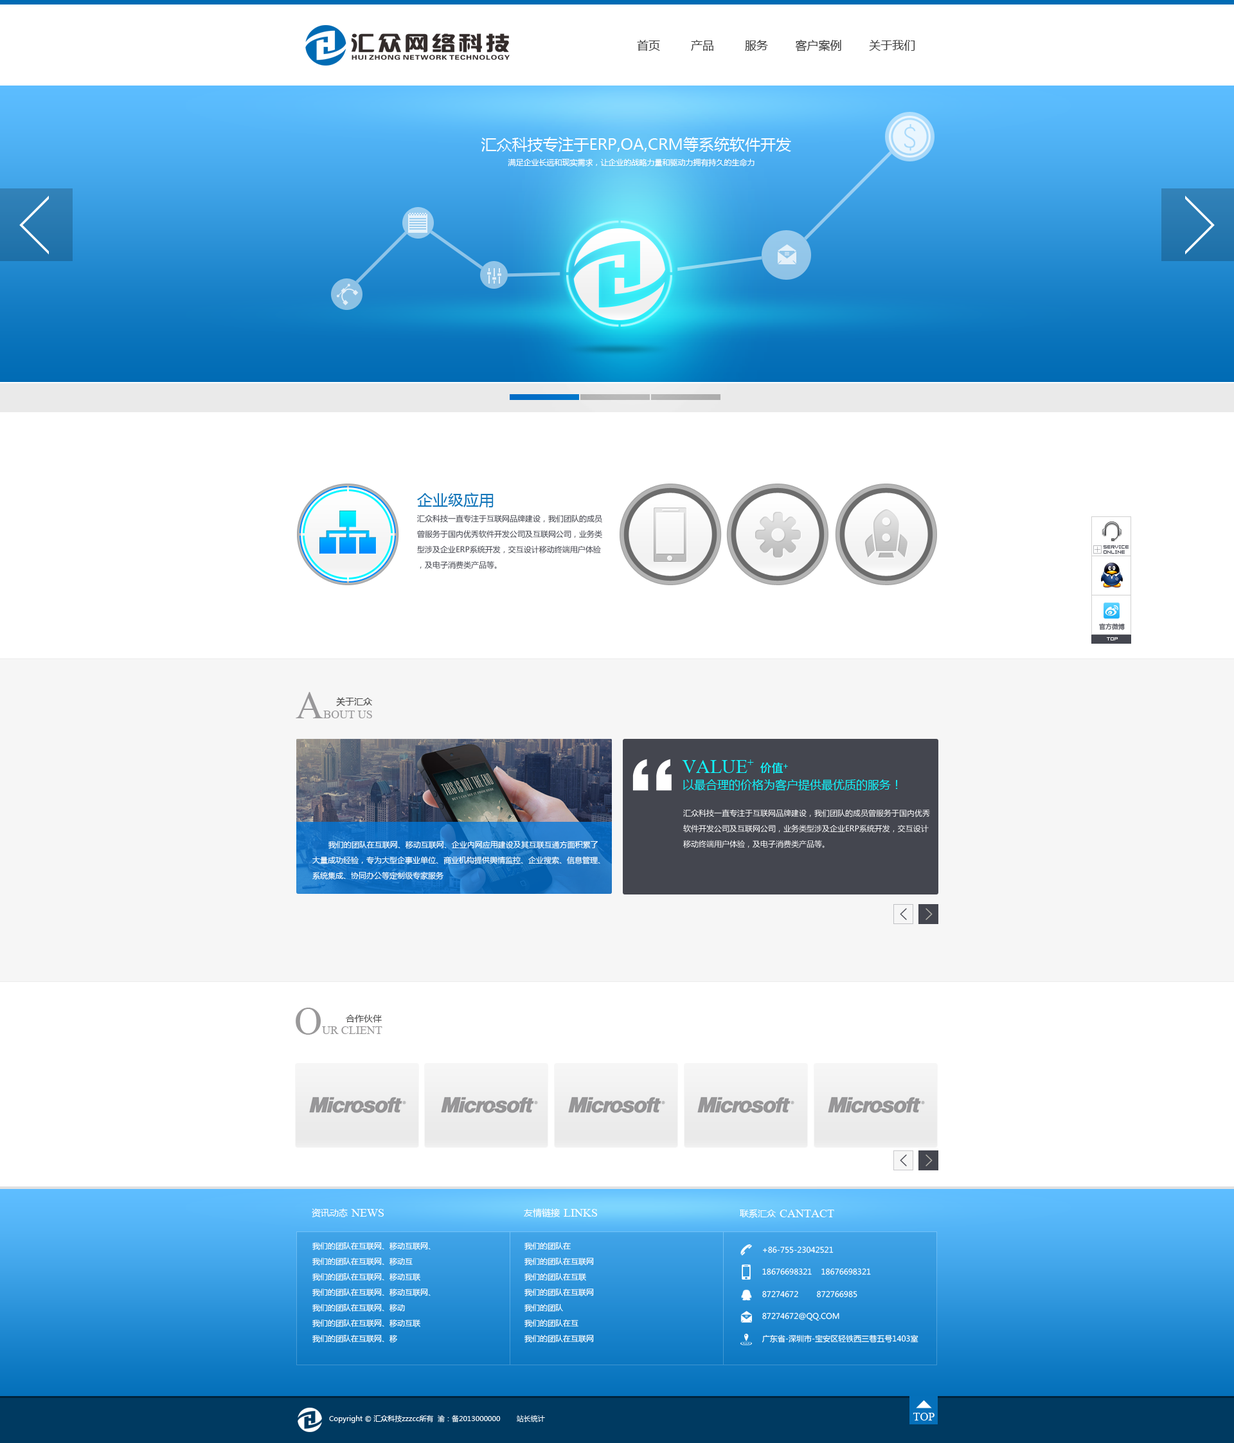
<style>
.page{position:relative;width:1234px;height:1443px;background:#ffffff}
.page>*{position:absolute;margin:0}
.t1{font:11.6px "MicrosoftYaHei";color:#3d3d3d}
.t2{font:15.4px "MicrosoftYaHei";color:#ffffff}
.t3{font:7.7px "MicrosoftYaHei";color:#ffffff}
.t4{font:15.4px "MicrosoftYaHei";color:#1275b9}
.t5{font:7.7px/15.4px "MicrosoftYaHei";color:#44464f}
.t6{font:5.1px/5.1px "04b08";color:#44464f}
.t7{font:6.4px "MicrosoftYaHei";color:#44464f}
.t8{font:11.6px "MongolianBaiti";color:#989799}
.t9{font:38.6px "MongolianBaiti";color:#989799}
.t10{font:9px "MicrosoftYaHei";color:#494949}
.t11{font:102px "FZH4FW--GB1-0";color:#ffffff}
.t12{font:19.3px "MongolianBaiti";color:#11f7ff}
.t13{font:11.6px "AdobeHeitiStd-Regular";color:#11f7ff}
.t14{font:11.6px "MicrosoftYaHei";color:#11f7ff}
.t15{font:7.7px/15.4px "MicrosoftYaHei";color:#ffffff}
.t16{font:11.6px "MongolianBaiti";color:#999899}
.t17{font:38.6px "MongolianBaiti";color:#999899}
.t18{font:9px "MicrosoftYaHei";color:#ffffff}
.t19{font:11.6px "MongolianBaiti";color:#ffffff}
.t20{font:7.8px/22.2px "MicrosoftYaHei";color:#ffffff;text-transform:uppercase}
.t21{font:7.1px "MicrosoftYaHei";color:#ffffff}
</style>
<div class="page">
<p class="t1" style="left:637px;top:39px;width:278px;height:12px">首页         产品         服务        客户案例        关于我们</p>
<p class="t2" style="left:481px;top:137px;width:310px;height:15px">汇众科技专注于ERP,OA,CRM等系统软件开发</p>
<p class="t3" style="left:508px;top:158px;width:247px;height:8px">满足企业长远和现实需求，让企业的战略力量和驱动力拥有持久的生命力</p>
<p class="t4" style="left:417px;top:492px;width:77px;height:15px">企业级应用</p>
<p class="t5" style="left:417px;top:514px;width:185px;height:55px">汇众科技一直专注于互联网品牌建设，我们团队的成员曾服务于国内优秀软件开发公司及互联网公司，业务类型涉及企业ERP系统开发，交互设计移动终端用户体验，及电子消费类产品等。</p>
<p class="t6" style="left:1104px;top:545px;width:25px;height:9px">SERVICE <br>ONLINE</p>
<p class="t7" style="left:1099px;top:623px;width:26px;height:7px">官方微博</p>
<p class="t8" style="left:296px;top:692px;width:76px;height:26px"><span class="t9">A</span>BOUT US</p>
<p class="t10" style="left:336px;top:697px;width:36px;height:9px">关于汇众</p>
<p class="t11" style="left:633px;top:759px;width:39px;height:32px">“</p>
<p class="t12" style="left:682px;top:759px;width:72px;height:14px">VALUE+</p>
<p class="t13" style="left:760px;top:762px;width:28px;height:11px">价值+</p>
<p class="t14" style="left:683px;top:779px;width:215px;height:12px">以最合理的价格为客户提供最优质的服务！</p>
<p class="t15" style="left:683px;top:809px;width:247px;height:39px">汇众科技一直专注于互联网品牌建设，我们团队的成员曾服务于国内优秀软件开发公司及互联网公司，业务类型涉及企业ERP系统开发，交互设计移动终端用户体验，及电子消费类产品等。</p>
<p class="t15" style="left:312px;top:840px;width:288px;height:39px">我们的团队在互联网、移动互联网、企业内网应用建设及其互联互通方面积累了大量成功经验，专为大型企事业单位、商业机构提供舆情监控、企业搜索、信息管理、系统集成、协同办公等定制级专家服务</p>
<p class="t16" style="left:296px;top:1007px;width:86px;height:27px"><span class="t17">O</span>UR CLIENT</p>
<p class="t10" style="left:346px;top:1014px;width:36px;height:8px">合作伙伴</p>
<p class="t18" style="left:312px;top:1208px;width:36px;height:9px">资讯动态</p>
<p class="t19" style="left:351px;top:1209px;width:33px;height:7px">NEWS</p>
<p class="t18" style="left:524px;top:1208px;width:36px;height:9px">友情链接</p>
<p class="t19" style="left:564px;top:1209px;width:34px;height:7px">LINKS</p>
<p class="t18" style="left:740px;top:1209px;width:36px;height:9px">联系汇众</p>
<p class="t19" style="left:780px;top:1209px;width:54px;height:8px">CANTACT</p>
<p class="t15" style="left:312px;top:1241px;width:119px;height:101px">我们的团队在互联网、移动互联网、<br>我们的团队在互联网、移动互<br>我们的团队在互联网、移动互联<br>我们的团队在互联网、移动互联网、<br>我们的团队在互联网、移动<br>我们的团队在互联网、移动互联<br>我们的团队在互联网、移</p>
<p class="t15" style="left:525px;top:1241px;width:69px;height:101px">我们的团队在<br>我们的团队在互联网<br>我们的团队在互联<br>我们的团队在互联网<br>我们的团队<br>我们的团队在互<br>我们的团队在互联网</p>
<p class="t20" style="left:762px;top:1246px;width:157px;height:96px">+86-755-23042521<br>18676698321    18676698321<br>87274672        872766985<br>87274672@qq.com<br>广东省-深圳市-宝安区轻铁西三巷五号1403室</p>
<p class="t21" style="left:329px;top:1414px;width:216px;height:9px">Copyright © 汇众科技zzzcc所有  渝：备2013000000　　 站长统计</p>
<p class="t19" style="left:913px;top:1412px;width:22px;height:8px">TOP</p>
</div>
